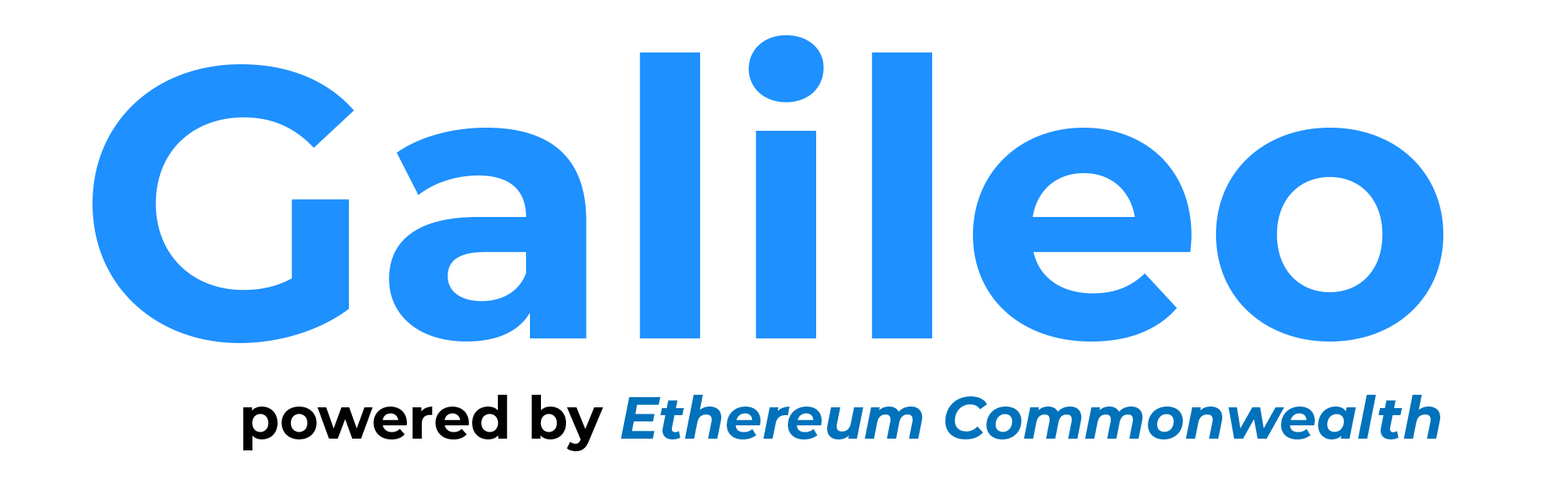
<style>
.page{position:relative;width:1568px;height:488px;background:#ffffff}
.page>*{position:absolute;margin:0}
.t1{font:385.5px "Montserrat-Bold";color:#1e90ff}
.t2{font:58.8px "Montserrat-BoldItalic";color:#0072bb}
.t3{font:58.8px "Montserrat-Bold";color:#000000}
</style>
<div class="page">
<p class="t1" style="left:93px;top:35px;width:1350px;height:308px">Galileo</p>
<p class="t2" style="left:243px;top:395px;width:1197px;height:57px"><span class="t3">powered by </span>Ethereum Commonwealth</p>
</div>
